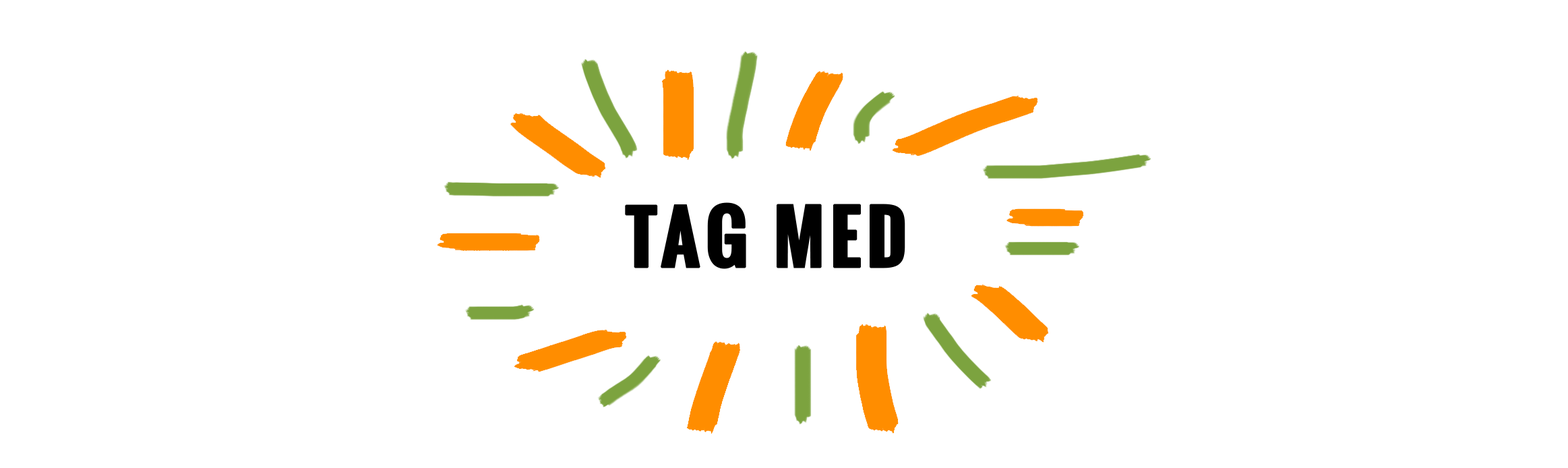
<style>
.page{position:relative;width:1568px;height:468px;background:#ffffff}
.page>*{position:absolute;margin:0}
.t1{font:70.1px "Oswald-Bold";letter-spacing:0.06em;color:#000000;font-weight:bold}
</style>
<div class="page">
<p class="t1" style="left:625px;top:202px;width:280px;height:67px">TAG MED</p>
</div>
